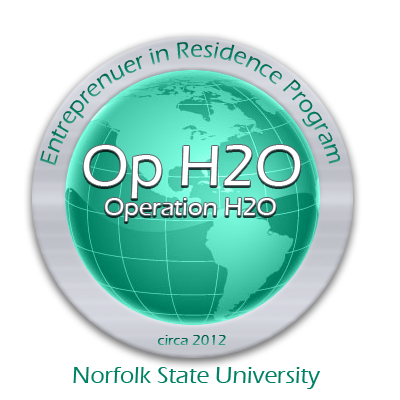
<style>
.page{position:relative;width:400px;height:400px;background:#ffffff}
.page>*{position:absolute;margin:0}
.t1{font:24px "ErasITC-Medium";color:#008164}
.t2{font:59px "ErasITC-Medium";color:#ffffff}
.t3{font:25px "ErasITC-Medium";color:#ffffff}
.t4{font:15px "ErasITC-Medium"}
</style>
<div class="page">
<p class="t1" style="left:40px;top:42px;width:301px;height:124px;text-align:center">Entreprenuer in Residence Program</p>
<p class="t2" style="left:83px;top:145px;width:218px;height:53px">Op H2O</p>
<p class="t3" style="left:105px;top:198px;width:171px;height:23px">Operation H2O</p>
<p class="t4" style="left:158px;top:335px;width:68px;height:10px">circa 2012</p>
<p class="t1" style="left:73px;top:367px;width:247px;height:22px">Norfolk State University</p>
</div>
